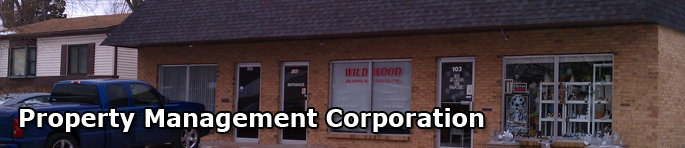
<style>
.page{position:relative;width:685px;height:148px}
.page>*{position:absolute;margin:0}
.t1{font:24px "Verdana-Bold";color:#ffffff}
</style>
<div class="page">
<p class="t1" style="left:20px;top:108px;width:464px;height:24px">Property Management Corporation</p>
</div>
